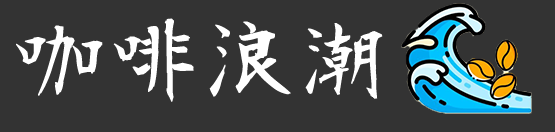
<style>
.page{position:relative;width:555px;height:132px;background:#333333}
.page>*{position:absolute;margin:0}
.t1{font:100px "KouzanBrushFont";letter-spacing:-0.075em;color:#ffffff;font-weight:bold}
</style>
<div class="page">
<p class="t1" style="left:16px;top:18px;width:367px;height:84px">咖啡浪潮</p>
</div>
